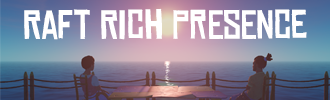
<style>
.page{position:relative;width:330px;height:100px}
.page>*{position:absolute;margin:0}
.t1{font:38.9px "ChineseRocksRg-Regular";color:#ffffff}
</style>
<div class="page">
<p class="t1" style="left:24px;top:8px;width:283px;height:32px">Raft Rich Presence</p>
</div>
